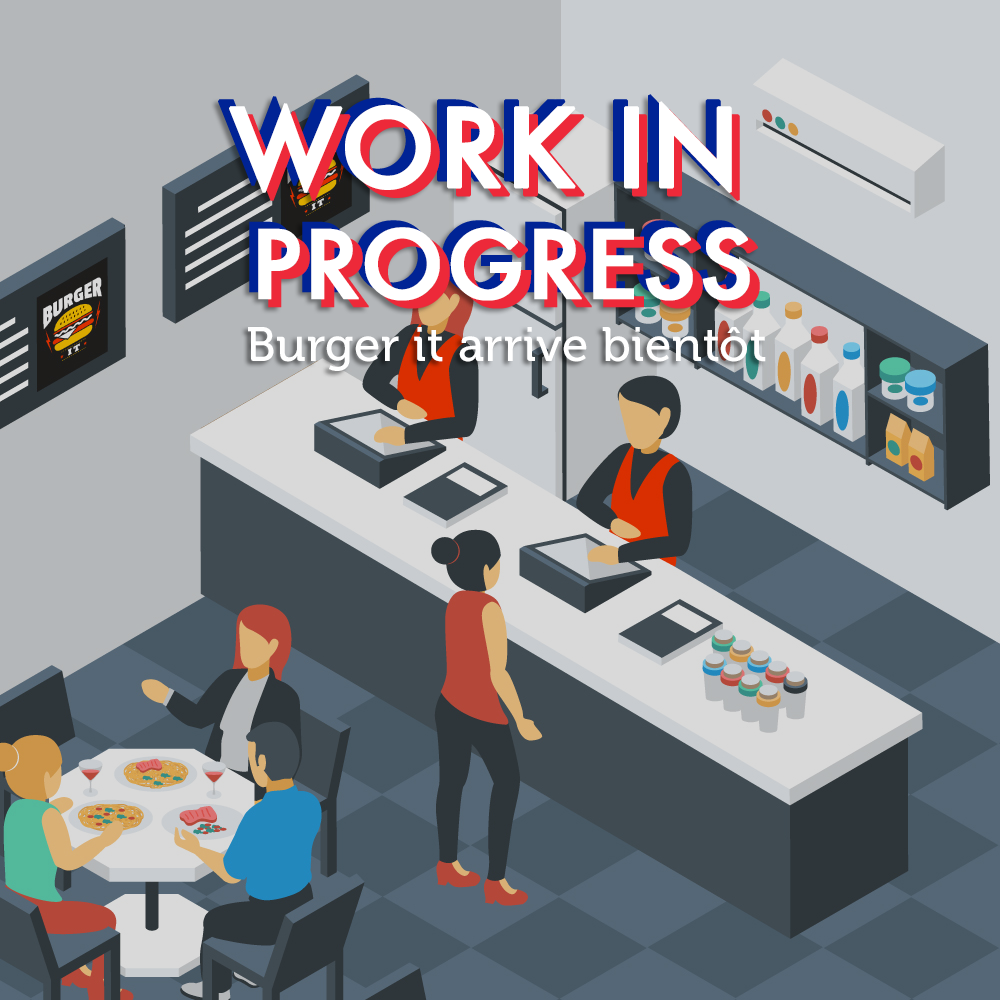
<style>
.page{position:relative;width:1000px;height:1000px}
.page>*{position:absolute;margin:0}
.t1{font:92px "Futura-Medium";letter-spacing:0.01em;color:#ffffff;text-transform:uppercase;font-weight:bold}
.t2{font:105px "Futura-Medium";letter-spacing:0.01em;color:#ffffff;text-transform:uppercase;font-weight:bold}
.t3{font:92px "Futura-Medium";letter-spacing:0.01em;text-transform:uppercase;font-weight:bold}
.t4{font:105px "Futura-Medium";letter-spacing:0.01em;text-transform:uppercase;font-weight:bold}
.t5{font:48px "Museo-500";letter-spacing:0.01em;color:#ffffff}
</style>
<div class="page">
<p class="t1" style="left:229px;top:101px;width:521px;height:200px;text-align:center"><span class="t2">Work in</span> <br>Progress</p>
<p class="t3" style="left:237px;top:109px;width:523px;height:200px;text-align:center"><span class="t4">Work in <br></span>Progress</p>
<p class="t5" style="left:248px;top:327px;width:518px;height:44px">Burger it arrive bientôt</p>
</div>
